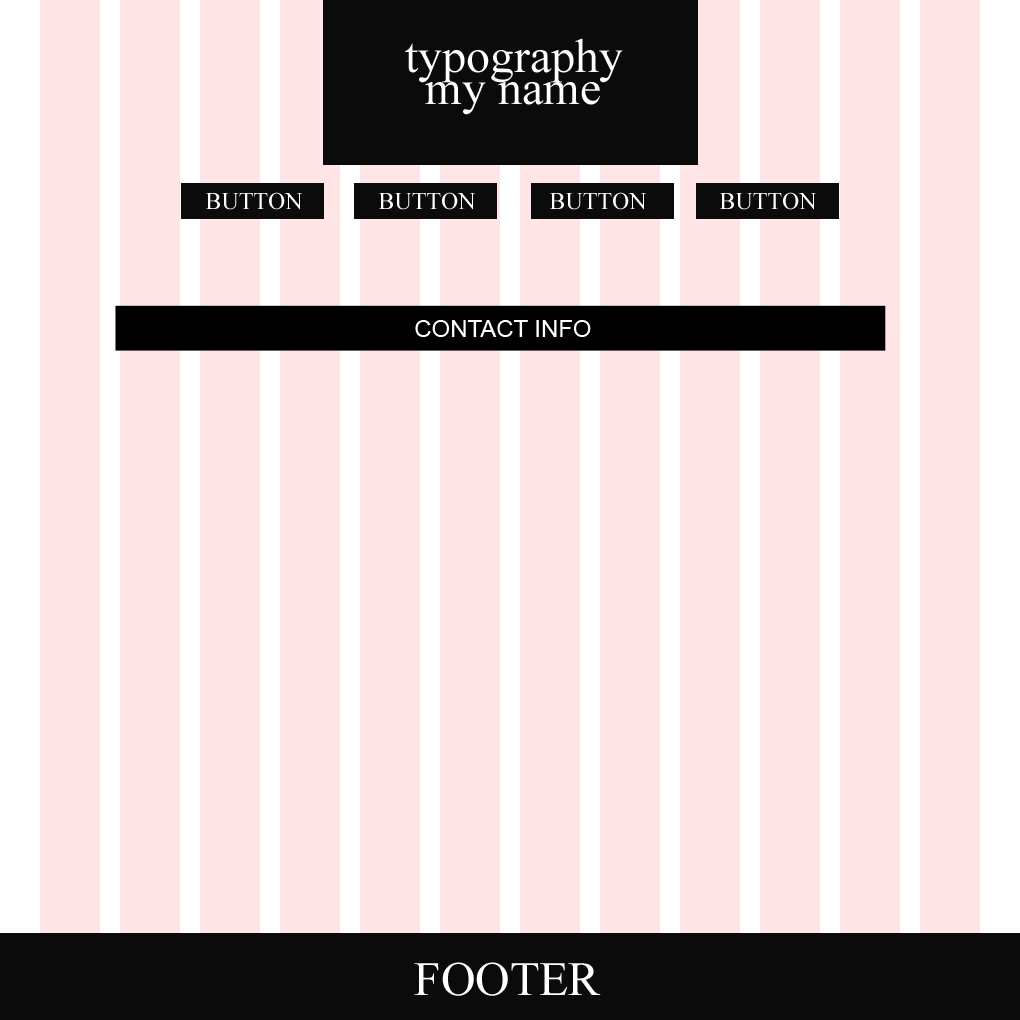
<style>
.page{position:relative;width:1020px;height:1020px;background:#ffe5e5}
.page>*{position:absolute;margin:0}
.t1{font:47.8px "TimesNewRomanPSMT";color:#ffffff}
.t2{font:23.9px "TimesNewRomanPSMT";color:#ffffff}
.t3{font:23.9px "ArialMT";color:#ffffff;text-transform:uppercase}
</style>
<div class="page">
<p class="t1" style="left:405px;top:38px;width:218px;height:45px">typography</p>
<p class="t1" style="left:425px;top:82px;width:175px;height:33px">my name</p>
<p class="t2" style="left:205px;top:192px;width:98px;height:18px">BUTTON</p>
<p class="t2" style="left:378px;top:192px;width:98px;height:18px">BUTTON</p>
<p class="t2" style="left:549px;top:192px;width:98px;height:18px">BUTTON</p>
<p class="t2" style="left:719px;top:192px;width:98px;height:18px">BUTTON</p>
<p class="t3" style="left:415px;top:320px;width:176px;height:17px">CONTACT INFO</p>
<p class="t1" style="left:414px;top:962px;width:187px;height:34px">FOOTER</p>
</div>
